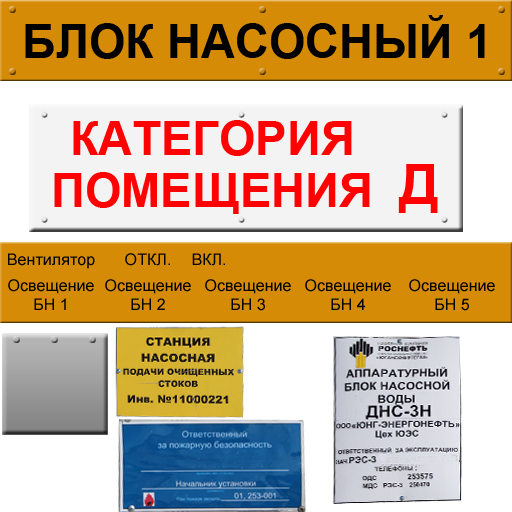
<style>
.page{position:relative;width:512px;height:512px;background:#d68b07}
.page>*{position:absolute;margin:0}
.t1{font:47px "Arial-BoldMT";color:#000000}
.t2{font:47px "Arial-BoldMT";color:#ff0101}
.t3{font:56px "Arial-BoldMT";color:#ff0101}
.t4{font:16.1px "ArialMT";color:#000000}
.t5{font:16.1px/19px "ArialMT";color:#000000}
</style>
<div class="page">
<p class="t1" style="left:25px;top:15px;width:460px;height:44px">БЛОК НАСОСНЫЙ 1</p>
<p class="t2" style="left:54px;top:120px;width:384px;height:94px;text-align:center">КАТЕГОРИЯ<br>     ПОМЕЩЕНИЯ  <span class="t3">Д</span></p>
<p class="t4" style="left:8px;top:253px;width:87px;height:16px">Вентилятор</p>
<p class="t4" style="left:125px;top:253px;width:45px;height:13px">ОТКЛ.</p>
<p class="t4" style="left:192px;top:253px;width:33px;height:13px">ВКЛ.</p>
<p class="t5" style="left:8px;top:279px;width:86px;height:31px;text-align:center">Освещение<br>БН 1</p>
<p class="t5" style="left:105px;top:279px;width:86px;height:31px;text-align:center">Освещение<br>БН 2</p>
<p class="t5" style="left:205px;top:279px;width:86px;height:32px;text-align:center">Освещение<br>БН 3</p>
<p class="t5" style="left:305px;top:279px;width:86px;height:31px;text-align:center">Освещение<br>БН 4</p>
<p class="t5" style="left:409px;top:279px;width:86px;height:32px;text-align:center">Освещение<br>БН 5</p>
</div>
